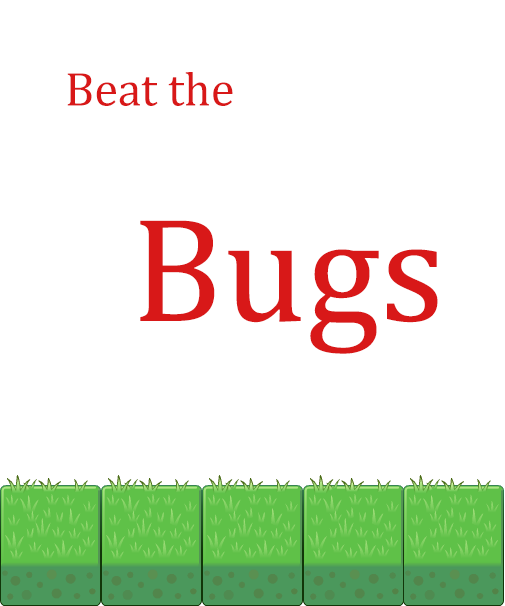
<style>
.page{position:relative;width:505px;height:606px;background:#ffffff}
.page>*{position:absolute;margin:0}
.t1{font:48px "Cambria";color:#d81818}
.t2{font:150px "Cambria";color:#d81818}
</style>
<div class="page">
<p class="t1" style="left:67px;top:72px;width:166px;height:34px">Beat the</p>
<p class="t2" style="left:140px;top:220px;width:298px;height:134px">Bugs</p>
</div>
